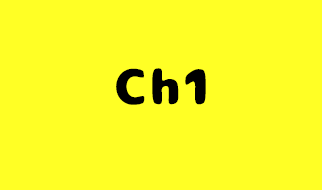
<style>
.page{position:relative;width:322px;height:190px;background:#ffff25}
.page>*{position:absolute;margin:0}
.t1{font:50px "07NikumaruFont";letter-spacing:0.08em;color:#000000}
</style>
<div class="page">
<p class="t1" style="left:116px;top:68px;width:90px;height:37px">Ch1</p>
</div>
